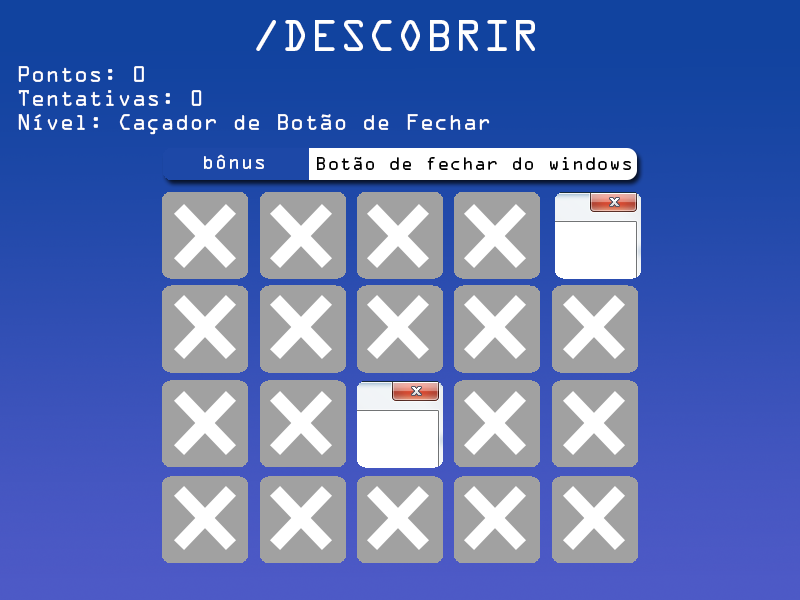
<style>
.page{position:relative;width:800px;height:600px;background:#a1a1a1}
.page>*{position:absolute;margin:0}
.t1{font:40px "OCRAStd";color:#ffffff}
.t2{font:20px "OCRAStd";color:#ffffff}
.t3{font:18px "OCRAStd";color:#ffffff}
.t4{font:17px "OCRAStd";color:#000000}
</style>
<div class="page">
<p class="t1" style="left:256px;top:20px;width:279px;height:31px">/DESCOBRIR</p>
<p class="t2" style="left:18px;top:66px;width:472px;height:69px">Pontos: 0<br>Tentativas: 0<br>Nível: Caçador de Botão de Fechar</p>
<p class="t3" style="left:204px;top:154px;width:60px;height:15px">bônus</p>
<p class="t4" style="left:317px;top:156px;width:314px;height:14px">Botão de fechar do windows</p>
</div>
